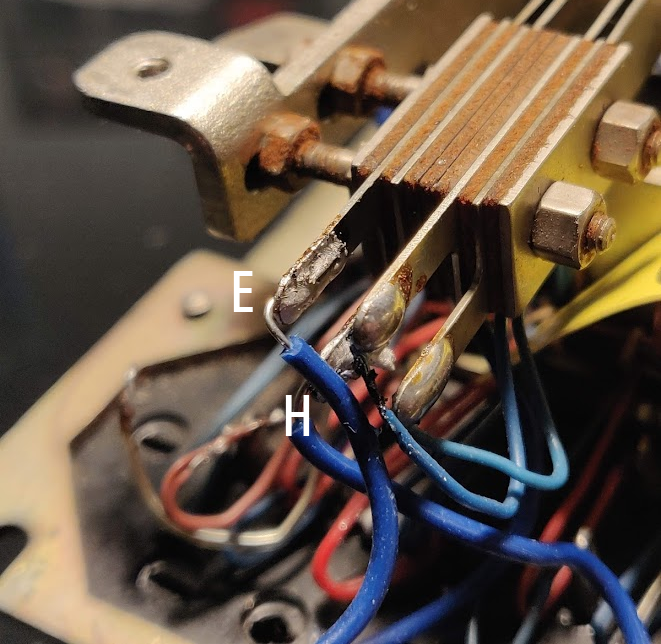
<style>
.page{position:relative;width:661px;height:644px}
.page>*{position:absolute;margin:0}
.t1{font:60px "UniversCondensed-Medium";color:#ffffff}
</style>
<div class="page">
<p class="t1" style="left:233px;top:271px;width:20px;height:41px">E</p>
<p class="t1" style="left:285px;top:395px;width:25px;height:41px">H</p>
</div>
